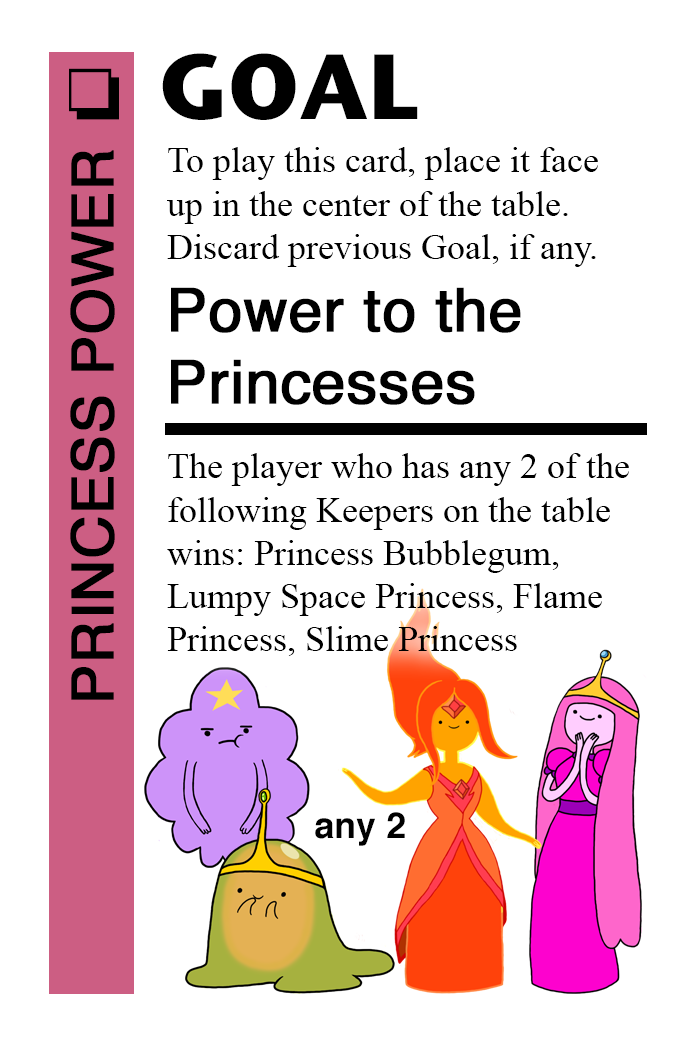
<style>
.page{position:relative;width:700px;height:1042px;background:#ffffff}
.page>*{position:absolute;margin:0}
.t1{font:92px "StoneSansITC-Bold";color:#000000}
.t2{font:72px "MS-Gothic";color:#000000}
.t3{font:58px "Helvetica";color:#000000;font-weight:bold}
.t4{font:36px "TimesNewRomanPSMT";color:#000000}
.t5{font:60px "Helvetica";color:#000000;font-weight:bold}
.t6{font:36px "Helvetica-Bold";color:#000000}
</style>
<div class="page">
<p class="t1" style="left:162px;top:53px;width:256px;height:67px">GOAL</p>
<p class="t2" style="left:69px;top:68px;width:50px;height:52px">❏</p>
<p class="t3" style="left:70px;top:150px;width:45px;height:550px;rotate:-90deg">PRINCESS POWER</p>
<p class="t4" style="left:167px;top:147px;width:431px;height:120px">To play this card, place it face<br>up in the center of the table.<br>Discard previous Goal, if any.</p>
<p class="t5" style="left:171px;top:287px;width:350px;height:118px">Power to the<br>Princesses</p>
<p class="t4" style="left:167px;top:453px;width:462px;height:203px">The player who has any 2 of the<br>following Keepers on the table <br>wins: Princess Bubblegum, <br>Lumpy Space Princess, Flame<br>Princess, Slime Princess</p>
<p class="t6" style="left:315px;top:812px;width:90px;height:34px">any 2</p>
</div>
